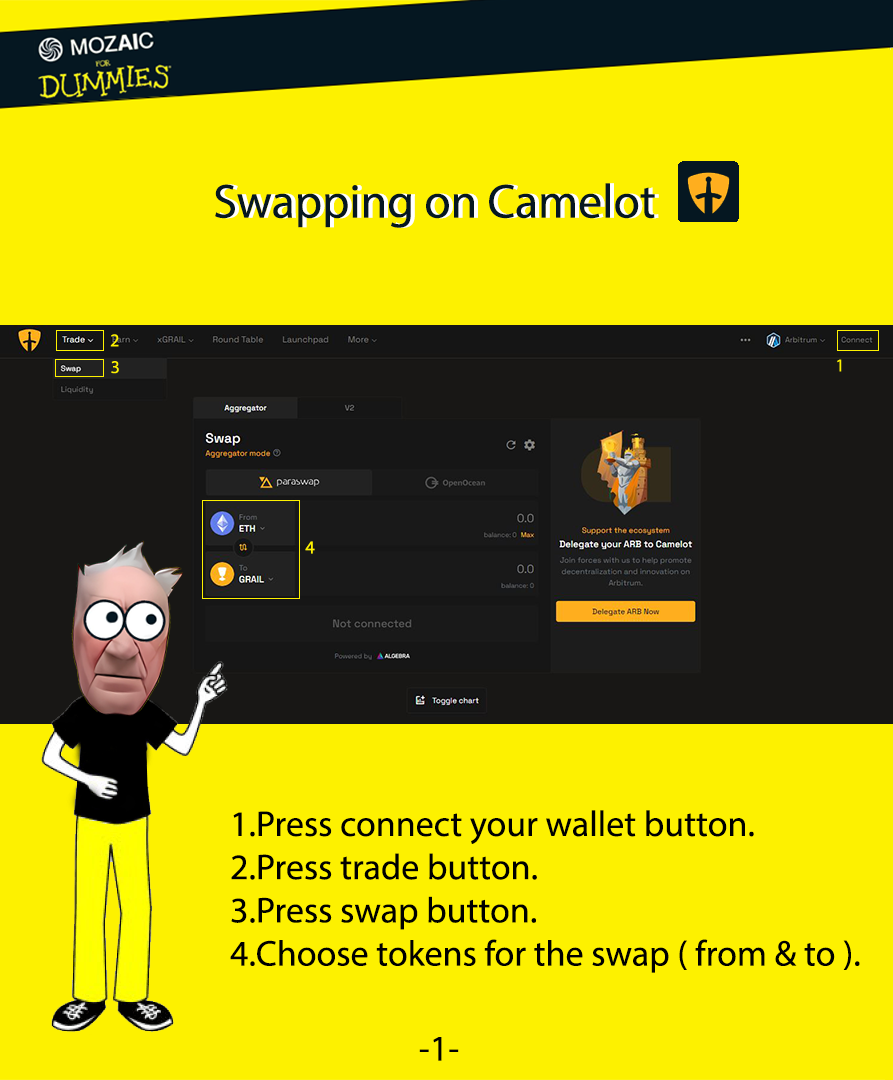
<style>
.page{position:relative;width:893px;height:1080px;background:#fdf100}
.page>*{position:absolute;margin:0}
.t1{font:48px "MyriadPro-Regular";color:#051721}
.t2{font:48px "MyriadPro-Regular";color:#ffffff}
.t3{font:18px "MyriadPro-Regular";color:#fdf100}
.t4{font:36px "MyriadPro-Regular";color:#000000}
.t5{font:36px "MyriadPro-Regular";color:#fdf100}
</style>
<div class="page">
<p class="t1" style="left:215px;top:183px;width:440px;height:45px">Swapping on Camelot</p>
<p class="t2" style="left:219px;top:183px;width:440px;height:45px">Swapping on Camelot</p>
<p class="t3" style="left:305px;top:541px;width:10px;height:13px">4</p>
<p class="t4" style="left:230px;top:810px;width:630px;height:163px"><span class="t5"><br></span><br>1.Press connect your wallet button.<br>2.Press trade button.<br>3.Press swap button.<br>4.Choose tokens for the swap ( from &amp; to ).</p>
<p class="t4" style="left:419px;top:1037px;width:40px;height:24px">-1-</p>
</div>
